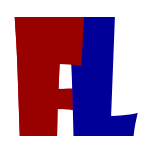
<style>
.page{position:relative;width:152px;height:152px;background:#ffffff}
.page>*{position:absolute;margin:0}
.t1{font:158.4px "ShowcardGothic-Reg";letter-spacing:0.32em;color:#990000;scale:0.86 1}
.t2{font:158.4px "ShowcardGothic-Reg";letter-spacing:0.32em;color:#000099;scale:0.86 1}
</style>
<div class="page">
<p class="t1" style="left:14px;top:17px;width:71px;height:119px">F</p>
<p class="t2" style="left:68px;top:17px;width:70px;height:119px">L</p>
</div>
